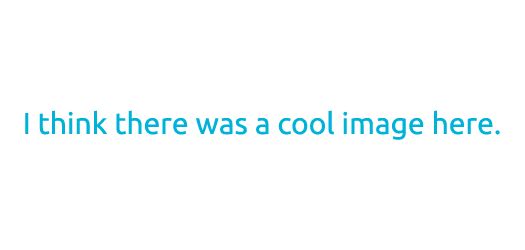
<style>
.page{position:relative;width:525px;height:250px;background:#ffffff}
.page>*{position:absolute;margin:0}
.t1{font:30px "Ubuntu-Regular";color:#00b2d7}
</style>
<div class="page">
<p class="t1" style="left:25px;top:110px;width:475px;height:30px">I think there was a cool image here.</p>
</div>
